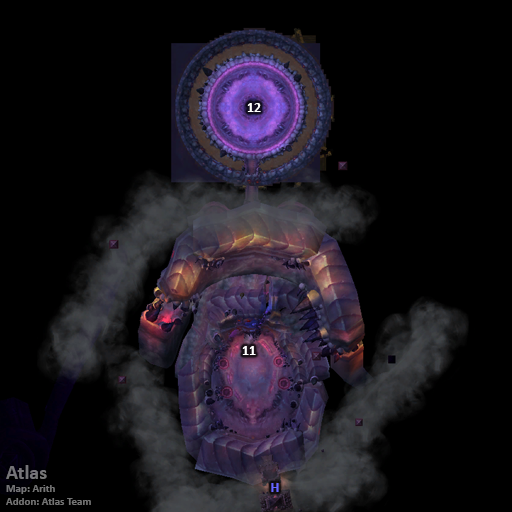
<style>
.page{position:relative;width:512px;height:512px;background:#000000}
.page>*{position:absolute;margin:0}
.t1{font:14px "Calibri-Bold";color:#ffffff}
.t2{font:11px "Calibri-Bold";color:#747475}
.t3{font:20px "Calibri-Bold";color:#747475}
.t4{font:14px "Calibri-Bold";color:#6666ff}
</style>
<div class="page">
<p class="t1" style="left:247px;top:103px;width:14px;height:9px">12</p>
<p class="t1" style="left:242px;top:346px;width:14px;height:9px">11</p>
<p class="t2" style="left:6px;top:465px;width:85px;height:40px"><span class="t3">Atlas<br></span>Map: Arith<br>Addon: Atlas Team</p>
<p class="t4" style="left:271px;top:483px;width:8px;height:9px">H</p>
</div>
